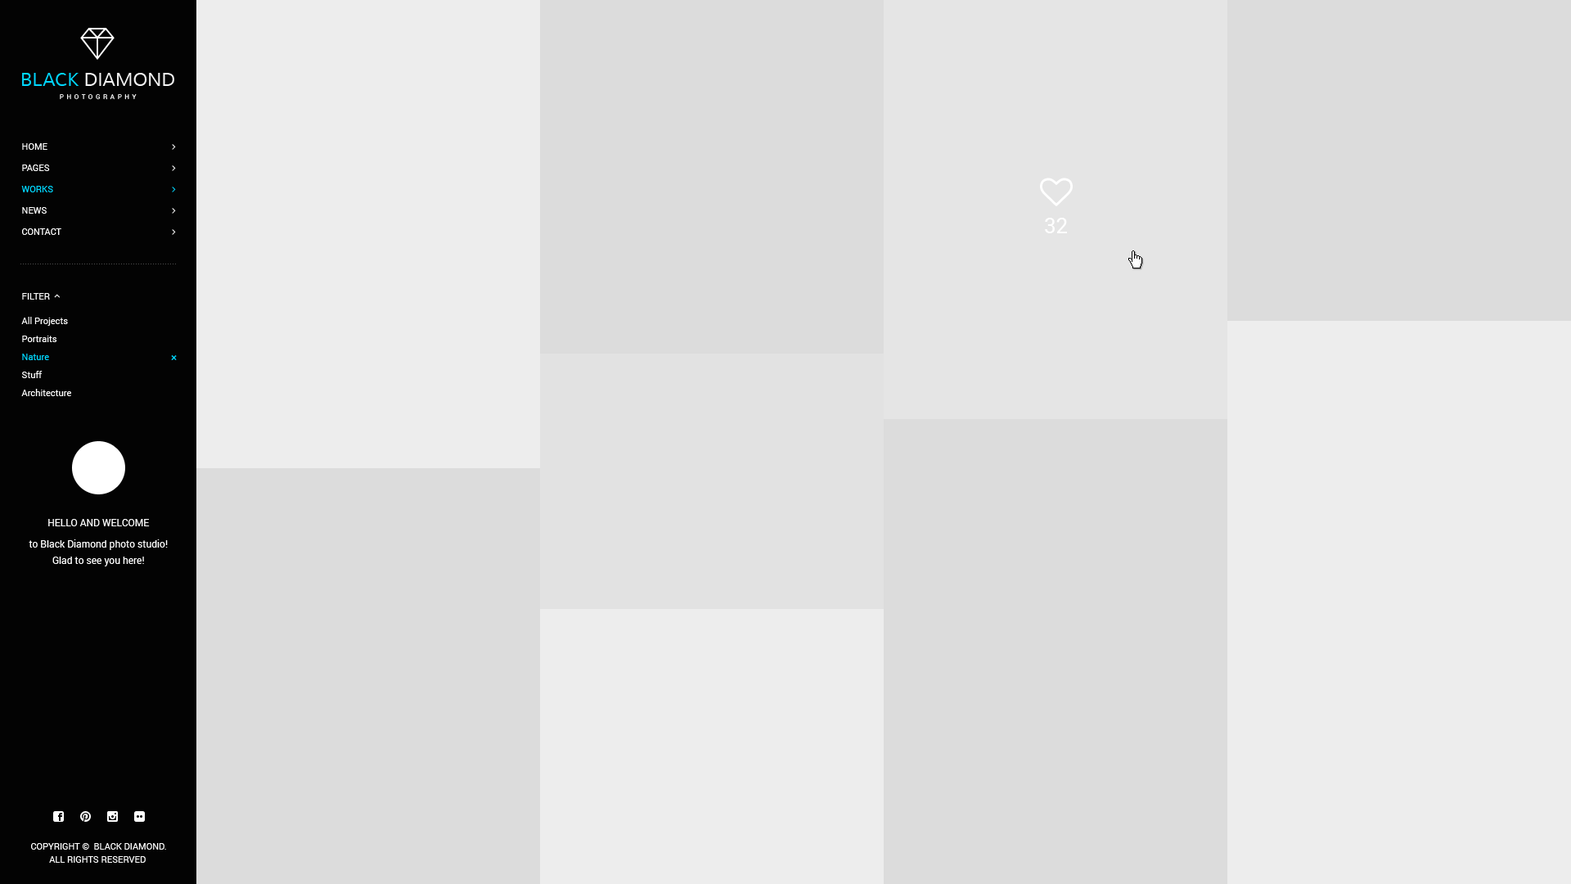
<style>
.page{position:relative;width:1571px;height:884px;background:#dcdcdc}
.page>*{position:absolute;margin:0}
.t1{font:9px/21.3px "Roboto-Regular";color:#ffffff;text-transform:uppercase}
.t2{font:9px/21.3px "Roboto-Regular";color:#00d8ff;text-transform:uppercase}
.t3{font:9px "Roboto-Regular";color:#fefefe}
.t4{font:9px/18px "Roboto-Regular";color:#ffffff}
.t5{font:9px/18px "Roboto-Regular";color:#fefefe}
.t6{font:9px/18px "Roboto-Regular";color:#00d8ff}
.t7{font:13.1px "PTSans-Regular";color:#00d8ff}
.t8{font:9.8px/16.4px "Roboto-Regular";color:#ffffff}
.t9{font:9.8px/16.4px "Roboto-Regular";color:#ffffff;text-transform:uppercase}
.t10{font:9.8px/21.3px "Roboto-Regular";color:#ffffff}
.t11{font:9px/13.1px "Roboto-Regular";color:#ffffff;text-transform:uppercase}
</style>
<div class="page">
<p class="t1" style="left:21px;top:143px;width:40px;height:92px">home<br>Pages<br><span class="t2">Works<br></span>News<br>Contact</p>
<p class="t3" style="left:22px;top:293px;width:28px;height:6px">FILTER</p>
<p class="t4" style="left:21px;top:317px;width:50px;height:79px"><span class="t5">All Projects<br></span>Portraits<br><span class="t6">Nature<br></span>Stuff<br>Architecture</p>
<p class="t7" style="left:171px;top:355px;width:6px;height:5px">×</p>
<p class="t8" style="left:29px;top:519px;width:139px;height:47px;text-align:center"><span class="t9">Hello And Welcome<br></span><span class="t10">t</span>o Black Diamond photo studio!<br>Glad to see you here!</p>
<p class="t11" style="left:31px;top:843px;width:135px;height:19px;text-align:center">Copyright ©  Black Diamond.<br>All Rights Reserved</p>
</div>
